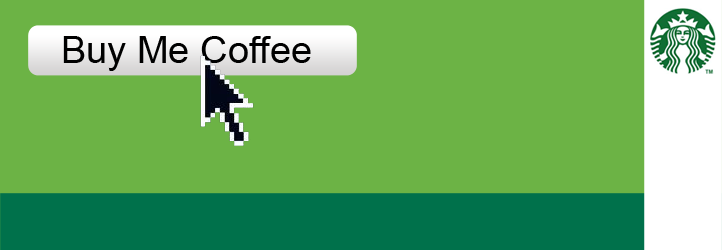
<style>
.page{position:relative;width:722px;height:250px;background:#6cb345}
.page>*{position:absolute;margin:0}
.t1{font:38px "ArialMT";color:#000000}
</style>
<div class="page">
<p class="t1" style="left:63px;top:36px;width:248px;height:35px">Buy Me Coffee</p>
</div>
